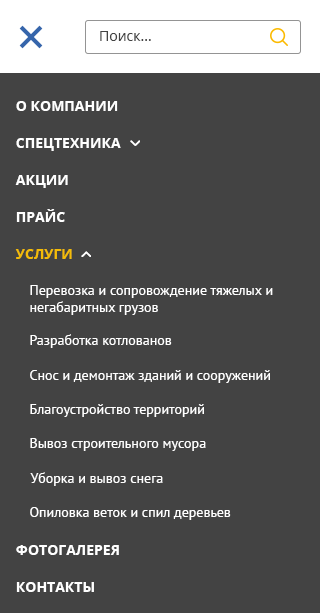
<style>
.page{position:relative;width:320px;height:613px;background:#434343}
.page>*{position:absolute;margin:0}
.t1{font:14px "OpenSans";color:#434343}
.t2{font:14px/37px "OpenSans-Bold";color:#ffffff;text-transform:uppercase}
.t3{font:14px/37px "OpenSans-Bold";color:#f4bc07;text-transform:uppercase}
.t4{font:14px "PTSans-Regular";color:#ffffff}
</style>
<div class="page">
<p class="t1" style="left:100px;top:31px;width:51px;height:10px">Поиск...</p>
<p class="t2" style="left:15px;top:101px;width:106px;height:491px">О компании<br>Спецтехника<br>АКЦИИ<br>Прайс<br><span class="t3">Услуги<br></span><br><br><br><br><br><br><br>Фотогалерея<br>Контакты</p>
<p class="t4" style="left:30px;top:285px;width:243px;height:30px">Перевозка и сопровождение тяжелых и <br>негабаритных грузов</p>
<p class="t4" style="left:30px;top:334px;width:142px;height:14px">Разработка котлованов</p>
<p class="t4" style="left:30px;top:370px;width:240px;height:13px">Снос и демонтаж зданий и сооружений</p>
<p class="t4" style="left:30px;top:404px;width:174px;height:13px">Благоустройство территорий</p>
<p class="t4" style="left:30px;top:438px;width:176px;height:13px">Вывоз строительного мусора</p>
<p class="t4" style="left:30px;top:472px;width:133px;height:14px">Уборка и вывоз снега</p>
<p class="t4" style="left:30px;top:507px;width:201px;height:13px">Опиловка веток и спил деревьев</p>
</div>
